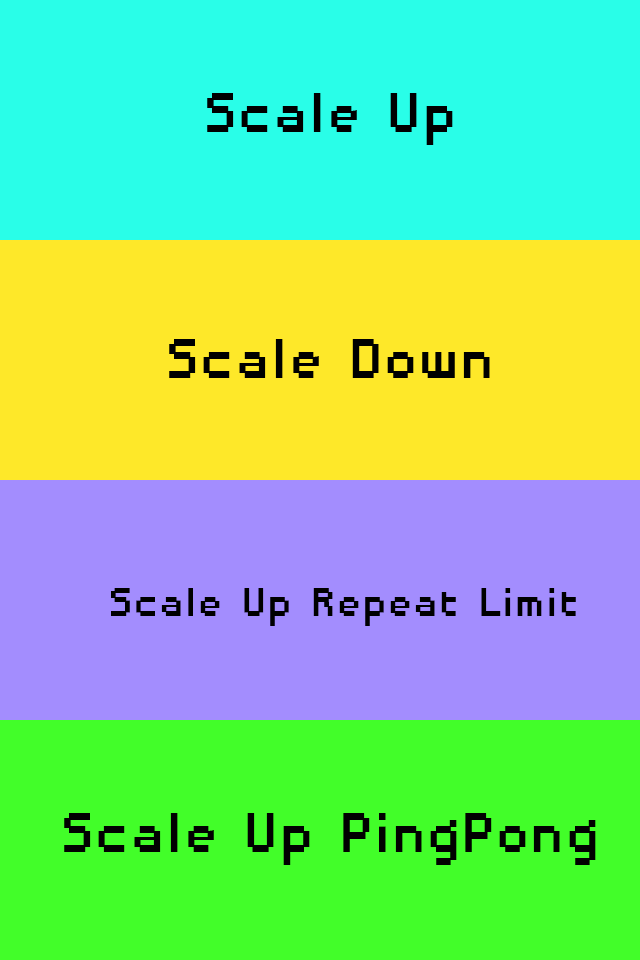
<style>
.page{position:relative;width:640px;height:960px;background:#a38dfe}
.page>*{position:absolute;margin:0}
.t1{font:72.6px "DisposableDroidBB";color:#000000}
.t2{font:52.6px "DisposableDroidBB";color:#000000}
.t3{font:72.6px "DisposableDroidBB";color:#010101}
</style>
<div class="page">
<p class="t1" style="left:207px;top:93px;width:246px;height:52px">Scale Up</p>
<p class="t1" style="left:169px;top:339px;width:321px;height:39px">Scale Down</p>
<p class="t2" style="left:111px;top:588px;width:465px;height:38px">Scale Up Repeat Limit</p>
<p class="t3" style="left:64px;top:813px;width:532px;height:52px">Scale Up PingPong</p>
</div>
